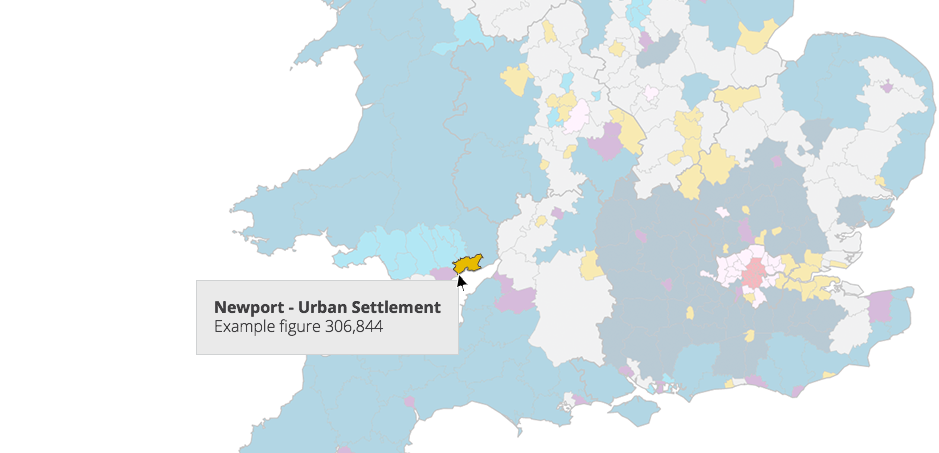
<style>
.page{position:relative;width:939px;height:453px;background:#ffffff}
.page>*{position:absolute;margin:0}
.t1{font:16px/19px "OpenSans-Bold";color:#414042}
.t2{font:16px/19px "OpenSans-Light";color:#414042}
</style>
<div class="page">
<p class="t1" style="left:215px;top:300px;width:226px;height:36px">Newport - Urban Settlement<br><span class="t2">Example figure 306,844</span></p>
</div>
